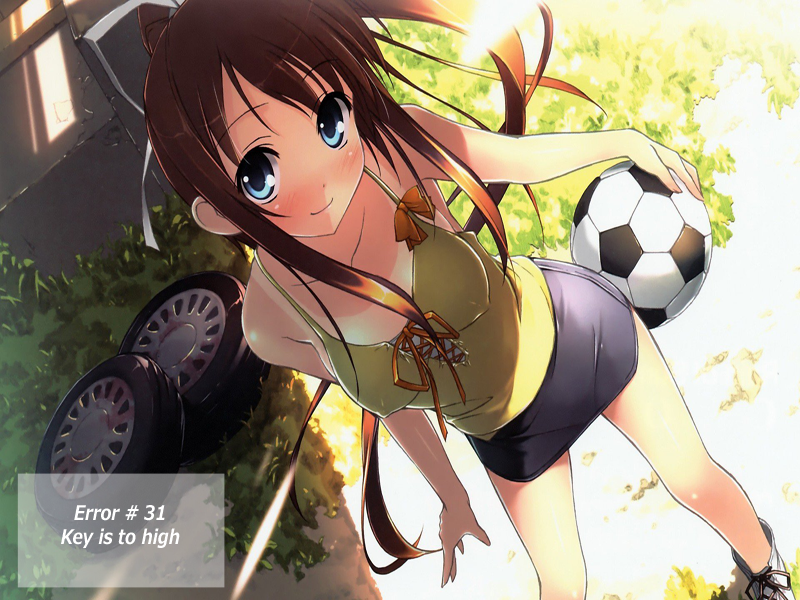
<style>
.page{position:relative;width:800px;height:600px}
.page>*{position:absolute;margin:0}
.t1{font:20px "Meiryo-BoldItalic";color:#ffffff;scale:0.83 1}
</style>
<div class="page">
<p class="t1" style="left:61px;top:505px;width:119px;height:43px;text-align:center">Error # 31<br>Key is to high</p>
</div>
